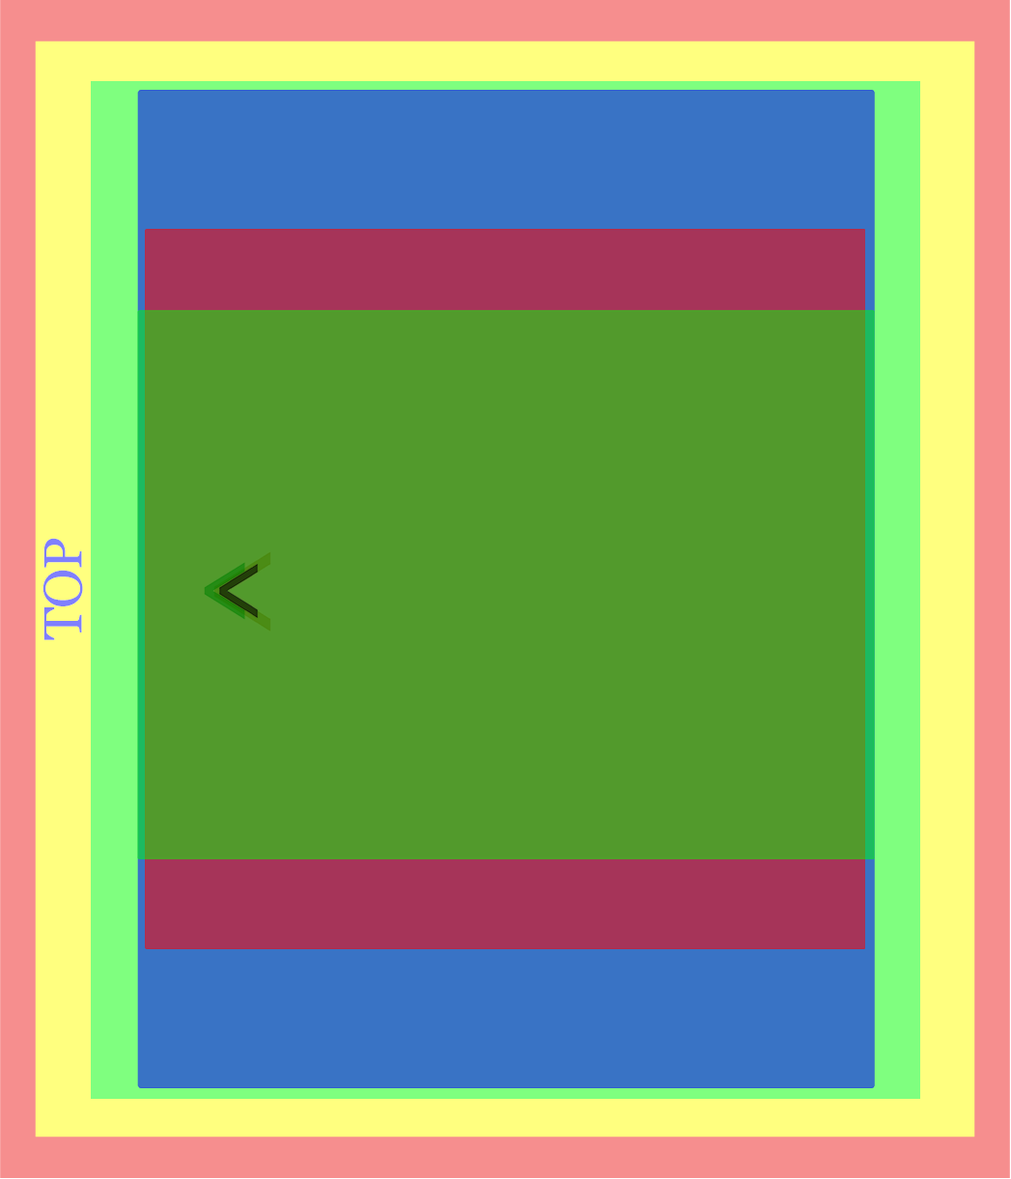
<style>
.page{position:relative;width:1011px;height:1179px;background:#529a2c}
.page>*{position:absolute;margin:0}
.t1{font:54px "Georgia";letter-spacing:-0.03em;color:#7f7ffe}
</style>
<div class="page">
<p class="t1" style="left:42px;top:538px;width:41px;height:102px;rotate:-90deg">TOP</p>
</div>
